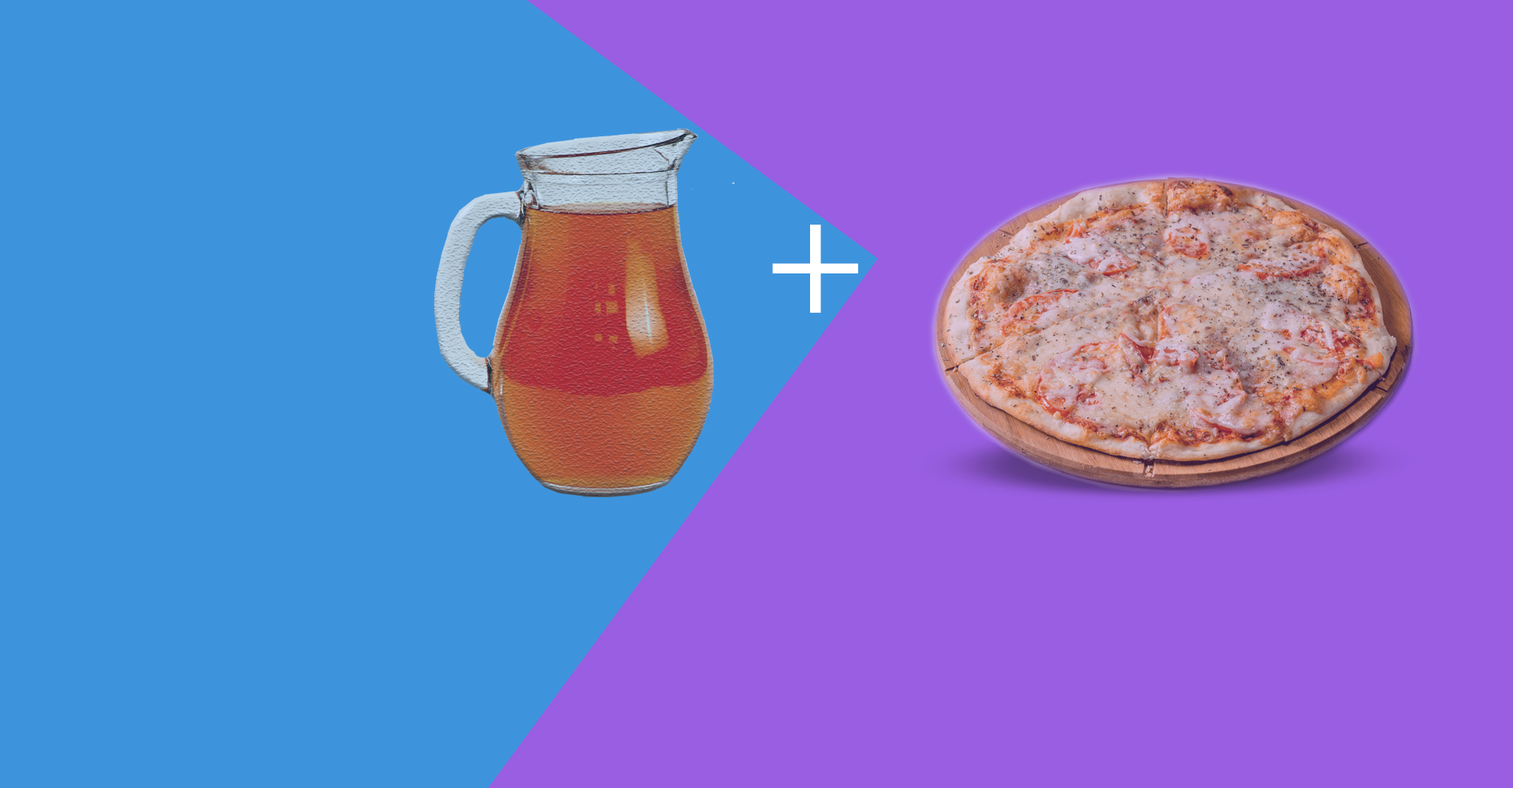
<style>
.page{position:relative;width:1513px;height:788px;background:#995ee2}
.page>*{position:absolute;margin:0}
.t1{font:165.5px "MyriadPro-Regular";color:#ffffff}
</style>
<div class="page">
<p class="t1" style="left:772px;top:225px;width:86px;height:88px">+</p>
</div>
